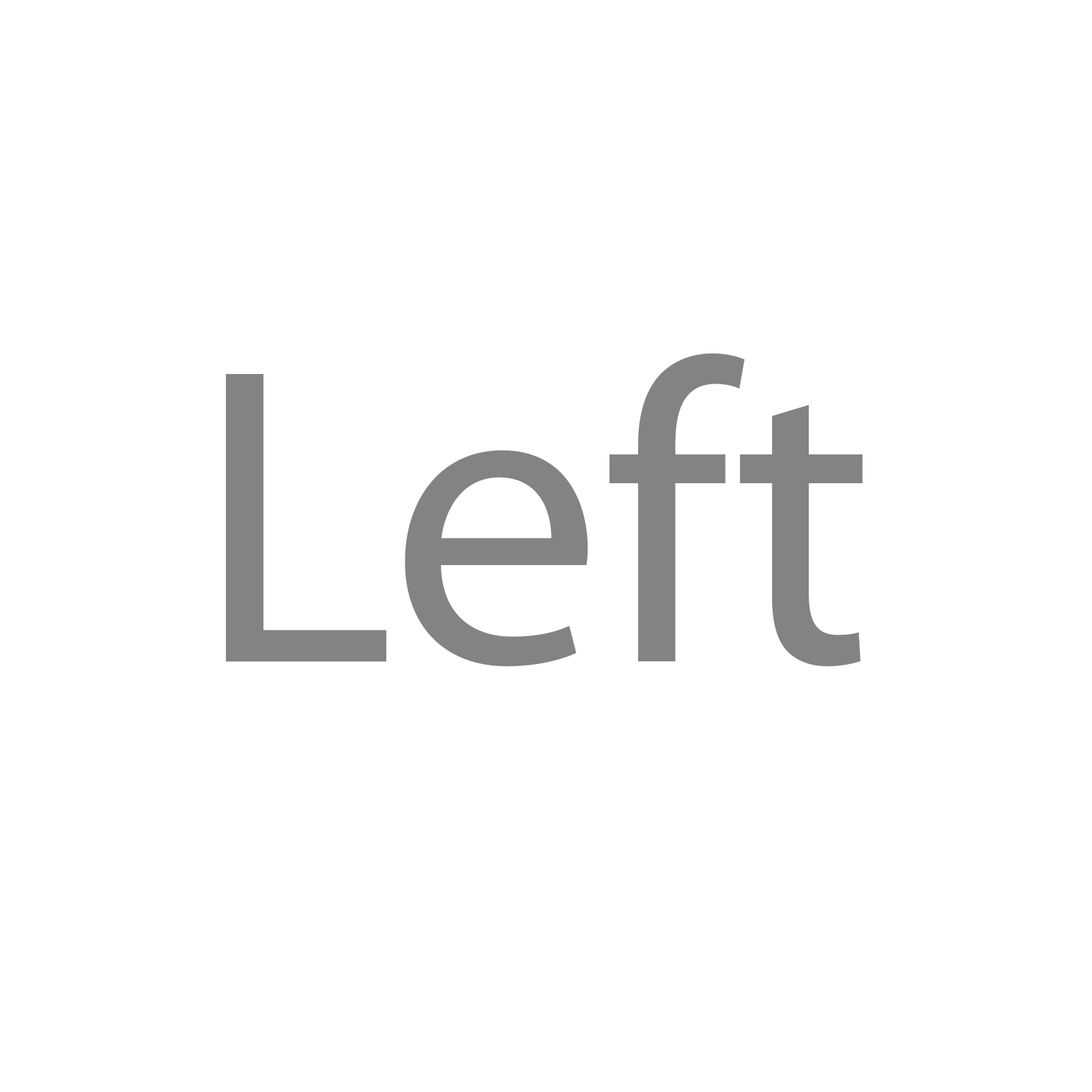
<style>
.page{position:relative;width:1092px;height:1092px;background:#ffffff}
.page>*{position:absolute;margin:0}
.t1{font:426.6px "MyriadPro-Regular";color:#838383}
</style>
<div class="page">
<p class="t1" style="left:226px;top:353px;width:637px;height:314px">Left</p>
</div>
